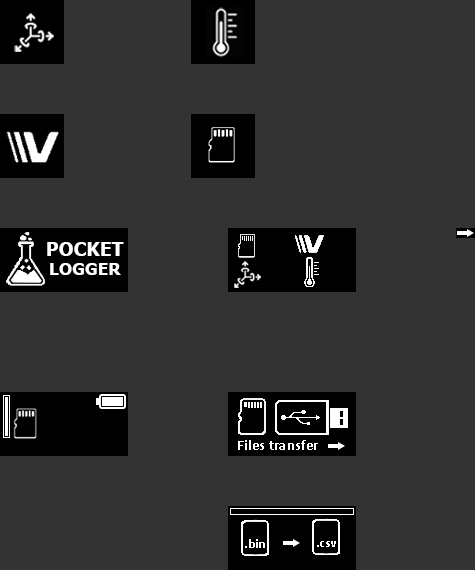
<style>
.page{position:relative;width:475px;height:570px;background:#333333}
.page>*{position:absolute;margin:0}
.t1{font:18.8px/18.5px "Tahoma-Bold";letter-spacing:0.02em;color:#ffffff}
.t2{font:16.7px/18.5px "Tahoma-Bold";letter-spacing:0.02em;color:#ffffff}
.t3{font:14.6px "Calibri-Bold";letter-spacing:0.02em;color:#ffffff}
.t4{font:12.5px "Calibri-Bold";letter-spacing:0.02em;color:#ffffff}
</style>
<div class="page">
<p class="t1" style="left:47px;top:242px;width:77px;height:33px;text-align:center">POCKET<br><span class="t2">LOGGER</span></p>
<p class="t3" style="left:238px;top:440px;width:80px;height:10px">Files transfer</p>
<p class="t4" style="left:245px;top:539px;width:20px;height:9px">.bin</p>
<p class="t4" style="left:317px;top:541px;width:19px;height:6px">.csv</p>
</div>
